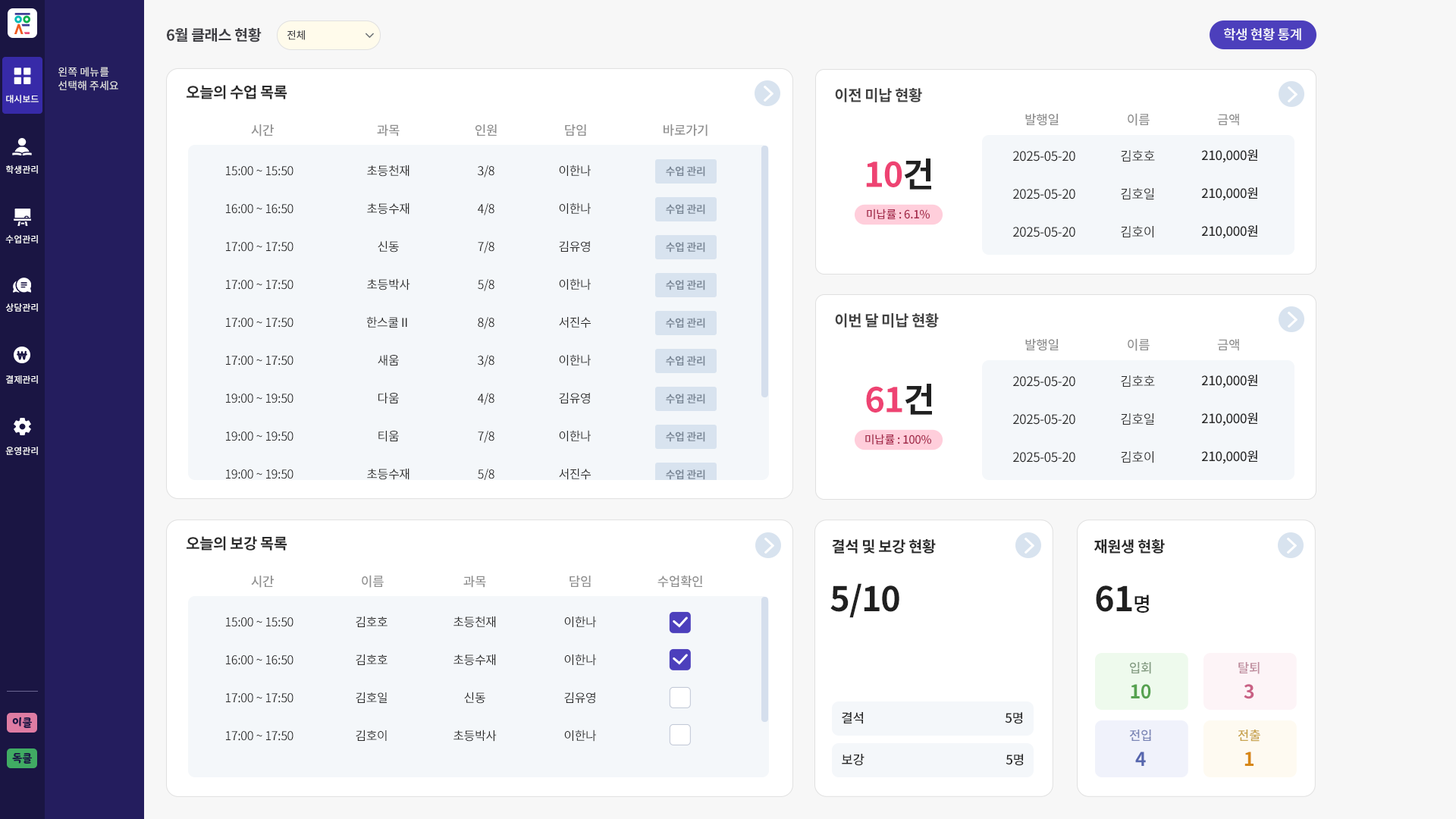
<style>
.page{position:relative;width:1456px;height:819px;background:#ffffff}
.page>*{position:absolute;margin:0}
.t1{font:15px "NotoSansCJKkr-Bold";letter-spacing:-0.025em;color:#3e3e43;text-transform:uppercase}
.t2{font:13.6px "NotoSansCJKkr-Medium";letter-spacing:-0.025em;color:#ffffff}
.t3{font:10.6px "NotoSansCJKkr-Medium";letter-spacing:-0.025em;color:#3e3e43;text-transform:uppercase}
.t4{font:10.6px/13.6px "NotoSansCJKkr-Medium";color:#e1e1e1}
.t5{font:15.2px "NotoSansCJKkr-Bold";letter-spacing:-0.025em;color:#2a2a2a}
.t6{font:15.2px "NotoSansCJKkr-Bold";letter-spacing:-0.025em;color:#404040}
.t7{font:9.1px "NotoSansCJKkr-Medium";color:#ffffff}
.t8{font:12.9px "NotoSansCJKkr-Medium";letter-spacing:-0.025em;color:#8f8f8f}
.t9{font:12.9px/37.9px "NotoSansCJKkr-Medium";letter-spacing:-0.025em;color:#2a2a2a}
.t10{font:34.2px "NotoSansCJKkr-Bold";letter-spacing:-0.025em;color:#ee4372}
.t11{font:34.2px "NotoSansCJKkr-Bold";letter-spacing:-0.025em;color:#202020}
.t12{font:12.9px/37.9px "NotoSansCJKkr-Regular";letter-spacing:-0.025em;color:#2a2a2a}
.t13{font:12.1px/37.9px "NotoSansCJKkr-Regular";letter-spacing:-0.025em;color:#2a2a2a}
.t14{font:10.6px/37.9px "NotoSansCJKkr-Bold";letter-spacing:-0.025em;color:#7c8998}
.t15{font:11.4px "NotoSansCJKkr-Medium";letter-spacing:-0.025em;color:#a4294a}
.t16{font:34.1px "NotoSansCJKkr-Bold";letter-spacing:-0.025em;color:#202020}
.t17{font:19.7px "NotoSansCJKkr-Medium";letter-spacing:-0.025em;color:#202020}
.t18{font:12.9px "NotoSansCJKkr-Medium";letter-spacing:-0.025em;color:#849c82}
.t19{font:12.9px "NotoSansCJKkr-Medium";letter-spacing:-0.025em;color:#be8c9d}
.t20{font:19px "NotoSansCJKkr-Bold";letter-spacing:-0.025em;color:#56a250}
.t21{font:19px "NotoSansCJKkr-Bold";letter-spacing:-0.025em;color:#c96084}
.t22{font:12.9px "NotoSansCJKkr-Medium";letter-spacing:-0.025em;color:#2a2a2a}
.t23{font:10.6px "YoonSoftSlime";color:#1a1543}
.t24{font:12.9px "NotoSansCJKkr-Medium";letter-spacing:-0.025em;color:#7b86b6}
.t25{font:12.9px "NotoSansCJKkr-Medium";letter-spacing:-0.025em;color:#c8a34e}
.t26{font:19px "NotoSansCJKkr-Bold";letter-spacing:-0.025em;color:#5666ae}
.t27{font:19px "NotoSansCJKkr-Bold";letter-spacing:-0.025em;color:#d78716}
</style>
<div class="page">
<p class="t1" style="left:167px;top:27px;width:95px;height:15px">6월 클래스 현황</p>
<p class="t2" style="left:1224px;top:28px;width:77px;height:13px">학생 현황 통계</p>
<p class="t3" style="left:287px;top:30px;width:18px;height:10px">전체</p>
<p class="t4" style="left:58px;top:67px;width:60px;height:24px">왼쪽 메뉴를<br>선택해 주세요</p>
<p class="t5" style="left:187px;top:85px;width:100px;height:14px">오늘의 수업 목록</p>
<p class="t6" style="left:835px;top:88px;width:87px;height:14px">이전 미납 현황</p>
<p class="t7" style="left:6px;top:95px;width:33px;height:8px">대시보드</p>
<p class="t8" style="left:1025px;top:113px;width:34px;height:13px">발행일</p>
<p class="t8" style="left:1128px;top:113px;width:22px;height:13px">이름</p>
<p class="t8" style="left:1217px;top:114px;width:22px;height:12px">금액</p>
<p class="t8" style="left:251px;top:124px;width:23px;height:12px">시간</p>
<p class="t8" style="left:377px;top:124px;width:23px;height:12px">과목</p>
<p class="t8" style="left:475px;top:124px;width:22px;height:12px">인원</p>
<p class="t8" style="left:565px;top:124px;width:21px;height:12px">담임</p>
<p class="t8" style="left:664px;top:124px;width:44px;height:12px">바로가기</p>
<p class="t9" style="left:1201px;top:149px;width:56px;height:90px;text-align:right">210,000원<br>210,000원<br>210,000원</p>
<p class="t10" style="left:866px;top:158px;width:65px;height:32px">10<span class="t11">건</span></p>
<p class="t12" style="left:1013px;top:151px;width:62px;height:86px">2025-05-20<br>2025-05-20<br>2025-05-20</p>
<p class="t12" style="left:1121px;top:150px;width:34px;height:88px">김호호<br>김호일<br>김호이</p>
<p class="t7" style="left:6px;top:165px;width:32px;height:9px">학생관리</p>
<p class="t13" style="left:226px;top:166px;width:67px;height:313px">15:00 ~ 15:50<br>16:00 ~ 16:50<br>17:00 ~ 17:50<br>17:00 ~ 17:50<br>17:00 ~ 17:50<br>17:00 ~ 17:50<br>19:00 ~ 19:50<br>19:00 ~ 19:50<br>19:00 ~ 19:50</p>
<p class="t13" style="left:366px;top:165px;width:44px;height:315px;text-align:center">초등천재<br>초등수재<br>신동<br>초등박사<br>한스쿨Ⅱ<br>새움<br>다움<br>티움<br>초등수재</p>
<p class="t13" style="left:478px;top:165px;width:16px;height:316px;text-align:center">3/8<br>4/8<br>7/8<br>5/8<br>8/8<br>3/8<br>4/8<br>7/8<br>5/8</p>
<p class="t13" style="left:559px;top:165px;width:32px;height:315px;text-align:center">이한나<br>이한나<br>김유영<br>이한나<br>서진수<br>이한나<br>김유영<br>이한나<br>서진수</p>
<p class="t14" style="left:666px;top:166px;width:39px;height:314px;text-align:center">수업 관리<br>수업 관리<br>수업 관리<br>수업 관리<br>수업 관리<br>수업 관리<br>수업 관리<br>수업 관리<br>수업 관리</p>
<p class="t15" style="left:867px;top:209px;width:63px;height:10px">미납률 : 6.1%</p>
<p class="t7" style="left:5px;top:235px;width:33px;height:8px">수업관리</p>
<p class="t7" style="left:5px;top:303px;width:33px;height:9px">상담관리</p>
<p class="t6" style="left:835px;top:313px;width:104px;height:15px">이번 달 미납 현황</p>
<p class="t8" style="left:1025px;top:338px;width:34px;height:13px">발행일</p>
<p class="t8" style="left:1128px;top:338px;width:22px;height:13px">이름</p>
<p class="t8" style="left:1217px;top:339px;width:22px;height:12px">금액</p>
<p class="t7" style="left:6px;top:375px;width:32px;height:9px">결제관리</p>
<p class="t12" style="left:1013px;top:376px;width:62px;height:87px">2025-05-20<br>2025-05-20<br>2025-05-20</p>
<p class="t12" style="left:1121px;top:375px;width:34px;height:88px">김호호<br>김호일<br>김호이</p>
<p class="t9" style="left:1201px;top:375px;width:56px;height:89px;text-align:right">210,000원<br>210,000원<br>210,000원</p>
<p class="t10" style="left:866px;top:384px;width:66px;height:31px">61<span class="t11">건</span></p>
<p class="t15" style="left:865px;top:434px;width:66px;height:10px">미납률 : 100%</p>
<p class="t7" style="left:5px;top:447px;width:33px;height:8px">운영관리</p>
<p class="t5" style="left:187px;top:536px;width:100px;height:15px">오늘의 보강 목록</p>
<p class="t5" style="left:832px;top:539px;width:104px;height:15px">결석 및 보강 현황</p>
<p class="t5" style="left:1094px;top:539px;width:71px;height:15px">재원생 현황</p>
<p class="t8" style="left:251px;top:576px;width:23px;height:12px">시간</p>
<p class="t8" style="left:362px;top:575px;width:22px;height:13px">이름</p>
<p class="t8" style="left:463px;top:576px;width:23px;height:12px">과목</p>
<p class="t8" style="left:570px;top:576px;width:21px;height:11px">담임</p>
<p class="t8" style="left:657px;top:575px;width:45px;height:13px">수업확인</p>
<p class="t16" style="left:830px;top:583px;width:69px;height:35px">5/10</p>
<p class="t16" style="left:1096px;top:585px;width:53px;height:28px">61<span class="t17">명</span></p>
<p class="t13" style="left:226px;top:617px;width:67px;height:124px">15:00 ~ 15:50<br>16:00 ~ 16:50<br>17:00 ~ 17:50<br>17:00 ~ 17:50</p>
<p class="t13" style="left:356px;top:616px;width:32px;height:125px;text-align:center">김호호<br>김호호<br>김호일<br>김호이</p>
<p class="t13" style="left:453px;top:616px;width:44px;height:126px;text-align:center">초등천재<br>초등수재<br>신동<br>초등박사</p>
<p class="t13" style="left:564px;top:616px;width:32px;height:126px;text-align:center">이한나<br>이한나<br>김유영<br>이한나</p>
<p class="t18" style="left:1130px;top:662px;width:21px;height:12px">입회</p>
<p class="t19" style="left:1238px;top:662px;width:22px;height:12px">탈퇴</p>
<p class="t20" style="left:1131px;top:684px;width:20px;height:15px">10</p>
<p class="t21" style="left:1244px;top:684px;width:10px;height:15px">3</p>
<p class="t22" style="left:842px;top:712px;width:21px;height:12px">결석</p>
<p class="t22" style="left:1005px;top:712px;width:18px;height:12px">5명</p>
<p class="t23" style="left:12px;top:717px;width:20px;height:11px">이클</p>
<p class="t24" style="left:1129px;top:730px;width:22px;height:11px">전입</p>
<p class="t25" style="left:1238px;top:730px;width:22px;height:12px">전출</p>
<p class="t23" style="left:12px;top:753px;width:20px;height:11px">독클</p>
<p class="t22" style="left:842px;top:754px;width:22px;height:12px">보강</p>
<p class="t22" style="left:1006px;top:754px;width:18px;height:12px">5명</p>
<p class="t26" style="left:1135px;top:751px;width:11px;height:15px">4</p>
<p class="t27" style="left:1244px;top:751px;width:10px;height:15px">1</p>
</div>
